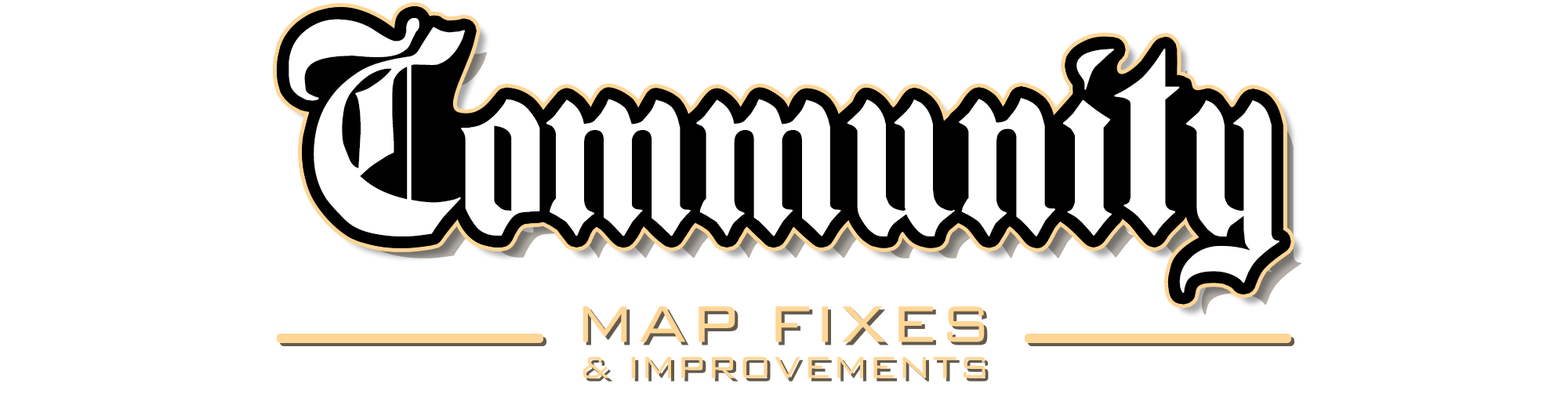
<style>
.page{position:relative;width:1568px;height:401px;background:#ffffff}
.page>*{position:absolute;margin:0}
.t1{font:294px "Beckett";letter-spacing:-0.04em;color:#ffffff;font-weight:bold}
.t2{font:68.6px "BankGothicBT-Light";letter-spacing:0.005em;color:#ffd696;text-transform:uppercase}
.t3{font:41.2px "BankGothicBT-Light";color:#ffd696;text-transform:uppercase}
</style>
<div class="page">
<p class="t1" style="left:289px;top:18px;width:990px;height:275px">Community</p>
<p class="t2" style="left:583px;top:307px;width:402px;height:36px">Map Fixes</p>
<p class="t3" style="left:583px;top:357px;width:402px;height:22px">&amp; improvements</p>
</div>
